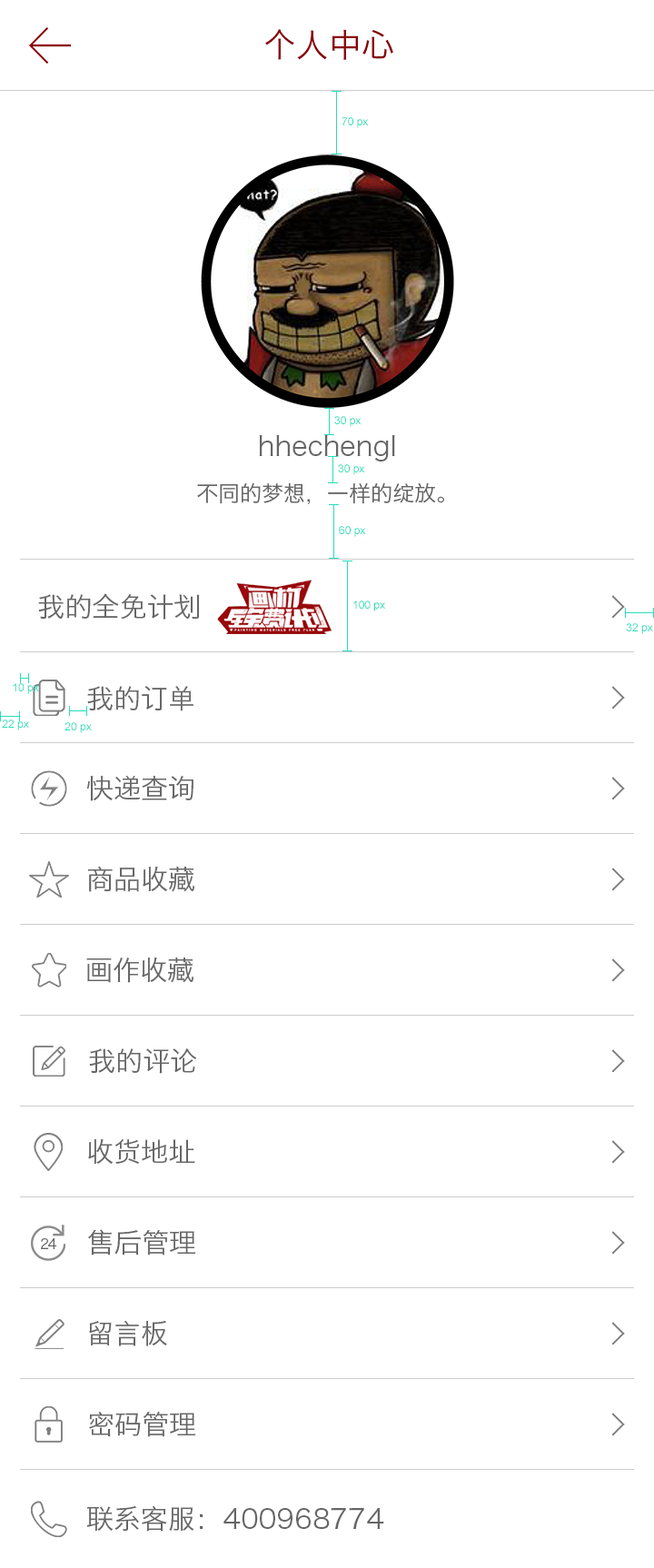
<style>
.page{position:relative;width:654px;height:1568px;background:#ffffff}
.page>*{position:absolute;margin:0}
.t1{font:32.7px "HiraginoSansGB-W3";color:#8a0105}
.t2{font:10.9px "ArialMT";color:#28ddb9}
.t3{font:27.3px "HiraginoSansGB-W3";color:#666666}
.t4{font:21.8px "HiraginoSansGB-W3";color:#666666}
.t5{font:27.2px "HiraginoSansGB-W3";color:#666666}
.t6{font:13.6px "HiraginoSansGB-W3";letter-spacing:-0.1em;color:#666666}
</style>
<div class="page">
<p class="t1" style="left:265px;top:29px;width:128px;height:31px">个人中心</p>
<p class="t2" style="left:342px;top:117px;width:27px;height:11px">70 px</p>
<p class="t2" style="left:334px;top:416px;width:28px;height:11px">30 px</p>
<p class="t3" style="left:259px;top:435px;width:136px;height:26px">hhechengl</p>
<p class="t2" style="left:338px;top:464px;width:27px;height:11px">30 px</p>
<p class="t4" style="left:197px;top:482px;width:247px;height:22px">不同的梦想，一样的绽放。</p>
<p class="t2" style="left:339px;top:526px;width:27px;height:11px">60 px</p>
<p class="t5" style="left:38px;top:593px;width:162px;height:27px">我的全免计划</p>
<p class="t2" style="left:353px;top:600px;width:32px;height:11px">100 px</p>
<p class="t2" style="left:626px;top:623px;width:27px;height:11px">32 px</p>
<p class="t2" style="left:13px;top:683px;width:26px;height:11px">10 px</p>
<p class="t5" style="left:87px;top:686px;width:107px;height:25px">我的订单</p>
<p class="t2" style="left:2px;top:719px;width:27px;height:11px">22 px</p>
<p class="t2" style="left:65px;top:722px;width:27px;height:11px">20 px</p>
<p class="t5" style="left:86px;top:775px;width:108px;height:26px">快递查询</p>
<p class="t5" style="left:88px;top:866px;width:106px;height:26px">商品收藏</p>
<p class="t5" style="left:86px;top:957px;width:108px;height:26px">画作收藏</p>
<p class="t5" style="left:89px;top:1048px;width:108px;height:26px">我的评论</p>
<p class="t5" style="left:88px;top:1138px;width:107px;height:26px">收货地址</p>
<p class="t5" style="left:88px;top:1229px;width:108px;height:26px">售后管理</p>
<p class="t6" style="left:41px;top:1238px;width:16px;height:11px">24</p>
<p class="t5" style="left:89px;top:1320px;width:78px;height:26px">留言板</p>
<p class="t5" style="left:89px;top:1411px;width:107px;height:26px">密码管理</p>
<p class="t5" style="left:86px;top:1505px;width:298px;height:27px">联系客服：400968774</p>
</div>
